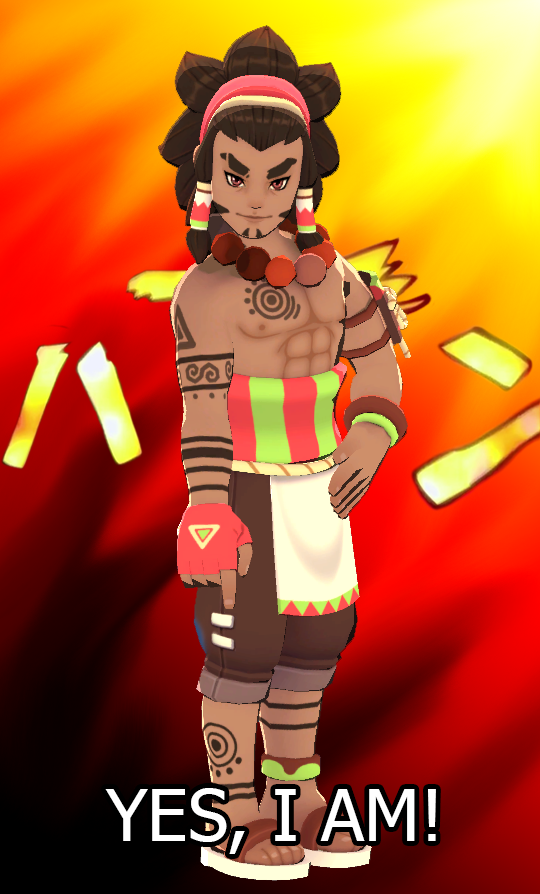
<style>
.page{position:relative;width:540px;height:894px}
.page>*{position:absolute;margin:0}
.t1{font:72px "Tahoma";color:#ffffff}
</style>
<div class="page">
<p class="t1" style="left:105px;top:788px;width:331px;height:66px">YES, I AM!</p>
</div>
